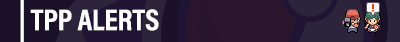
<style>
.page{position:relative;width:400px;height:42px;background:#2c243a}
.page>*{position:absolute;margin:0}
.t1{font:30px "AcuminProCond-Bold";color:#ffffff;text-transform:uppercase}
</style>
<div class="page">
<p class="t1" style="left:30px;top:9px;width:129px;height:22px">TPP Alerts</p>
</div>
